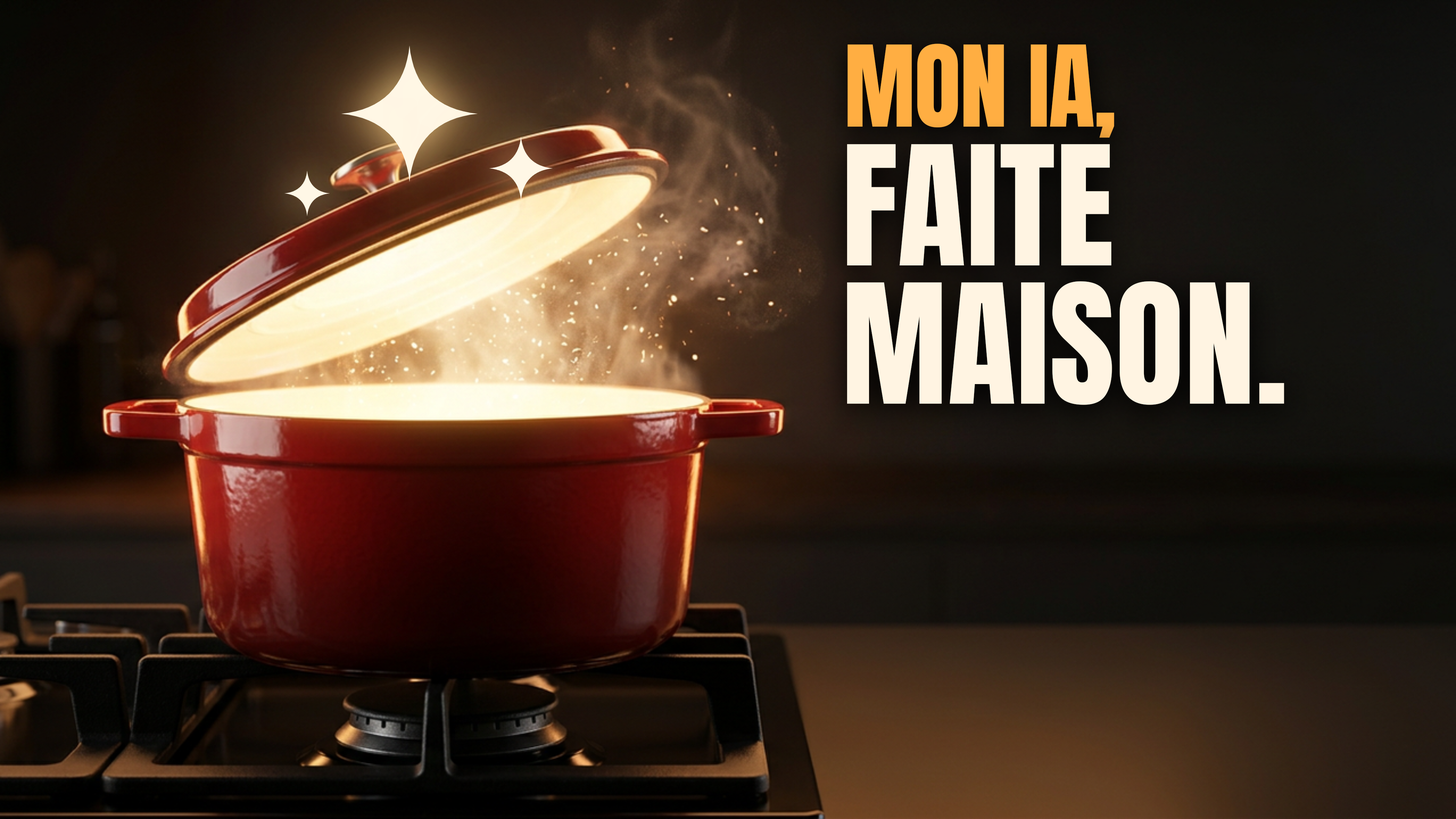
<style>
.page{position:relative;width:1456px;height:819px}
.page>*{position:absolute;margin:0}
.t1{font:95.5px "Anton-Regular";letter-spacing:-0.01em;color:#ffae42}
.t2{font:141px/138.2px "Anton-Regular";letter-spacing:0.005em;color:#fff4e2}
</style>
<div class="page">
<p class="t1" style="left:847px;top:44px;width:268px;height:94px">MON IA,</p>
<p class="t2" style="left:847px;top:144px;width:438px;height:261px">FAITE<br>MAISON.</p>
</div>
